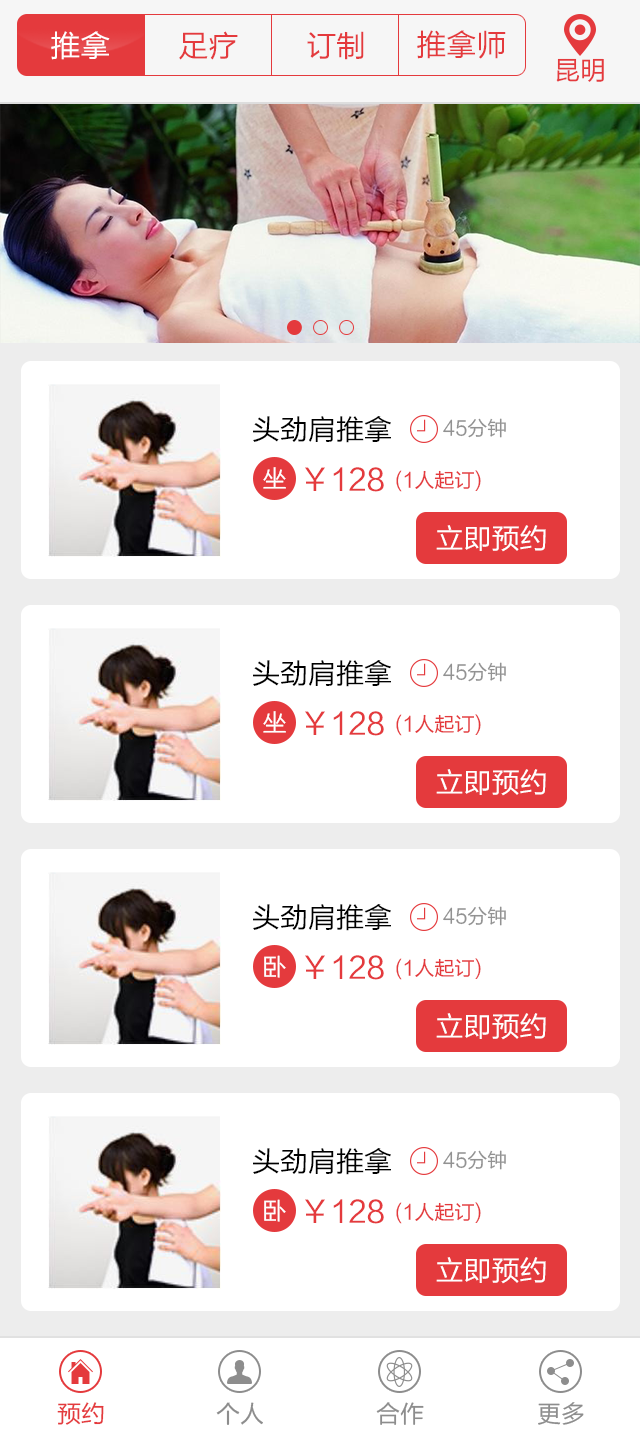
<style>
.page{position:relative;width:640px;height:1439px;background:#ffffff}
.page>*{position:absolute;margin:0}
.t1{font:30px "FZLTHJW--GB1-0";color:#e43a3d}
.t2{font:30px "FZLTHJW--GB1-0";color:#ffffff}
.t3{font:26px "FZLTHJW--GB1-0";color:#e43a3d}
.t4{font:28px "FZLTHJW--GB1-0";color:#000000}
.t5{font:20px "FZLTHJW--GB1-0";color:#929292}
.t6{font:24px "FZLTHJW--GB1-0";color:#ffffff}
.t7{font:20px "FZLTHJW--GB1-0";color:#e43a3d}
.t8{font:28px "FZLTHJW--GB1-0";color:#ffffff}
.t9{font:24px "FZLTHJW--GB1-0";color:#e43a3d}
.t10{font:24px "FZLTHJW--GB1-0";color:#8d8d8d}
</style>
<div class="page">
<p class="t1" style="left:417px;top:30px;width:89px;height:29px">推拿师</p>
<p class="t2" style="left:51px;top:31px;width:59px;height:29px">推拿</p>
<p class="t1" style="left:179px;top:31px;width:59px;height:29px">足疗</p>
<p class="t1" style="left:307px;top:31px;width:57px;height:29px">订制</p>
<p class="t3" style="left:556px;top:58px;width:48px;height:24px">昆明</p>
<p class="t4" style="left:253px;top:416px;width:138px;height:27px">头劲肩推拿</p>
<p class="t5" style="left:443px;top:418px;width:63px;height:20px">45分钟</p>
<p class="t6" style="left:263px;top:467px;width:23px;height:22px">坐</p>
<p class="t1" style="left:305px;top:467px;width:79px;height:25px">￥128</p>
<p class="t7" style="left:396px;top:470px;width:85px;height:22px">(1人起订)</p>
<p class="t8" style="left:436px;top:525px;width:110px;height:27px">立即预约</p>
<p class="t4" style="left:253px;top:660px;width:138px;height:27px">头劲肩推拿</p>
<p class="t5" style="left:443px;top:662px;width:63px;height:20px">45分钟</p>
<p class="t6" style="left:263px;top:711px;width:23px;height:22px">坐</p>
<p class="t1" style="left:305px;top:711px;width:79px;height:25px">￥128</p>
<p class="t7" style="left:396px;top:714px;width:85px;height:22px">(1人起订)</p>
<p class="t8" style="left:436px;top:769px;width:110px;height:27px">立即预约</p>
<p class="t4" style="left:253px;top:904px;width:138px;height:27px">头劲肩推拿</p>
<p class="t5" style="left:443px;top:906px;width:63px;height:20px">45分钟</p>
<p class="t6" style="left:264px;top:955px;width:22px;height:23px">卧</p>
<p class="t1" style="left:305px;top:955px;width:79px;height:25px">￥128</p>
<p class="t7" style="left:396px;top:958px;width:85px;height:22px">(1人起订)</p>
<p class="t8" style="left:436px;top:1013px;width:110px;height:27px">立即预约</p>
<p class="t4" style="left:253px;top:1148px;width:138px;height:27px">头劲肩推拿</p>
<p class="t5" style="left:443px;top:1150px;width:63px;height:20px">45分钟</p>
<p class="t6" style="left:264px;top:1199px;width:22px;height:23px">卧</p>
<p class="t1" style="left:305px;top:1199px;width:79px;height:25px">￥128</p>
<p class="t7" style="left:396px;top:1202px;width:85px;height:22px">(1人起订)</p>
<p class="t8" style="left:436px;top:1257px;width:110px;height:27px">立即预约</p>
<p class="t9" style="left:57px;top:1402px;width:47px;height:23px">预约</p>
<p class="t10" style="left:216px;top:1402px;width:47px;height:23px">个人</p>
<p class="t10" style="left:376px;top:1402px;width:48px;height:23px">合作</p>
<p class="t10" style="left:538px;top:1402px;width:46px;height:23px">更多</p>
</div>
